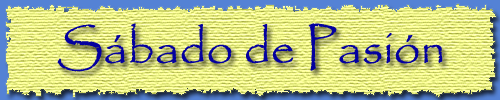
<style>
.page{position:relative;width:500px;height:100px}
.page>*{position:absolute;margin:0}
.t1{font:48px "Papyrus-Regular";color:#04009f}
</style>
<div class="page">
<p class="t1" style="left:57px;top:23px;width:386px;height:49px">Sábado de Pasión</p>
</div>
